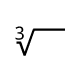
<style>
.page{position:relative;width:80px;height:80px;background:#ffffff}
.page>*{position:absolute;margin:0}
.t1{font:18px "DroidSans";color:#000000}
</style>
<div class="page">
<p class="t1" style="left:15px;top:26px;width:9px;height:14px">3</p>
</div>
